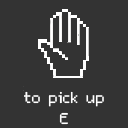
<style>
.page{position:relative;width:128px;height:128px;background:#333333}
.page>*{position:absolute;margin:0}
.t1{font:25px/20.8px "m5x7";color:#ffffff}
</style>
<div class="page">
<p class="t1" style="left:24px;top:91px;width:80px;height:34px;text-align:center">to pick up<br>E</p>
</div>
